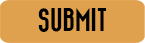
<style>
.page{position:relative;width:145px;height:43px;background:#dfa14e}
.page>*{position:absolute;margin:0}
.t1{font:24px "Bazar";color:#000000}
</style>
<div class="page">
<p class="t1" style="left:38px;top:8px;width:69px;height:24px">SUBMIT</p>
</div>
